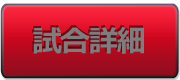
<style>
.page{position:relative;width:180px;height:80px}
.page>*{position:absolute;margin:0}
.t1{font:29.7px "Meiryo-Bold";letter-spacing:-0.05em;color:#7d7d7d;text-transform:uppercase}
</style>
<div class="page">
<p class="t1" style="left:33px;top:26px;width:111px;height:28px">試合詳細</p>
</div>
